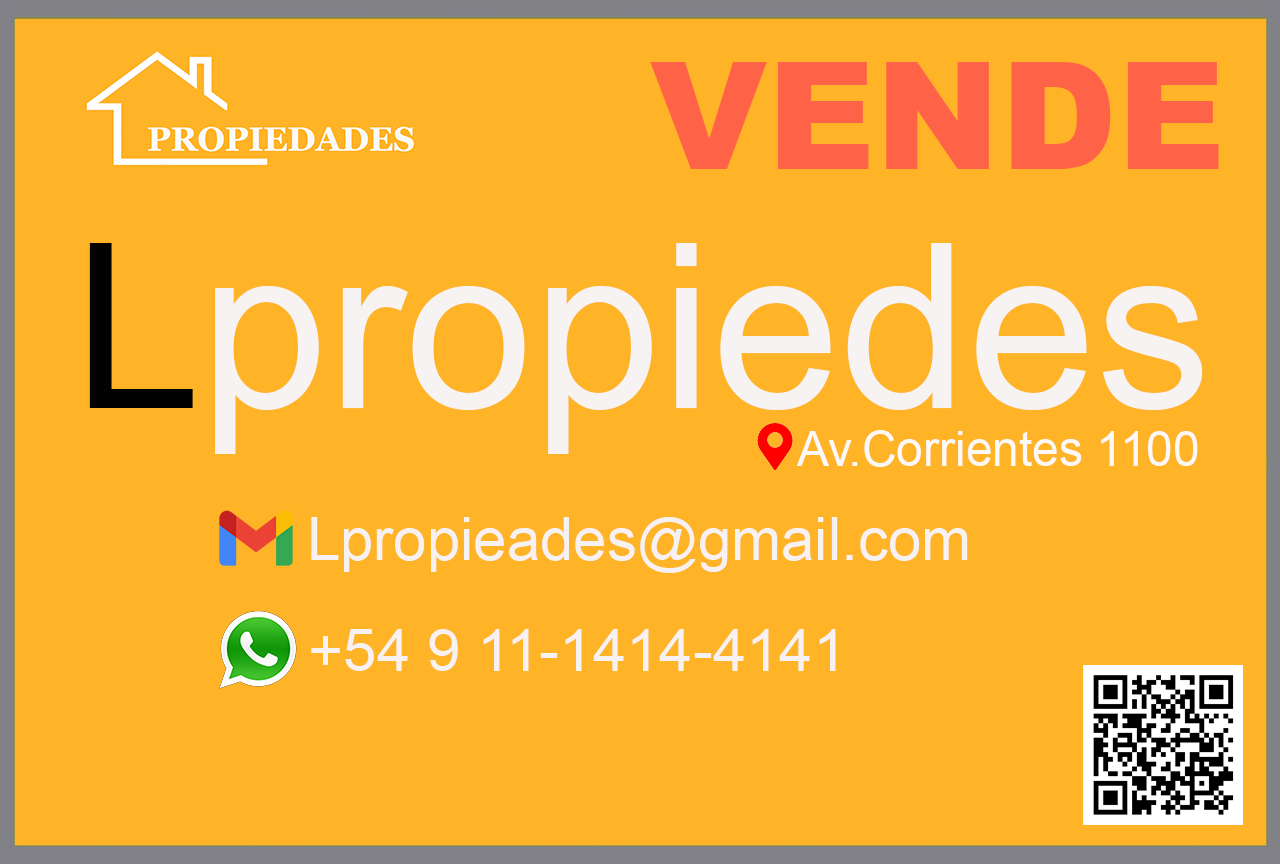
<style>
.page{position:relative;width:1280px;height:864px;background:#ffb326}
.page>*{position:absolute;margin:0}
.t1{font:150px "Arial-Black";color:#ff6347}
.t2{font:230px "ArialMT";color:#f7f3f3}
.t3{font:230px "ArialMT";color:#030202}
.t4{font:48px "ArialMT";color:#fcf8f8}
.t5{font:60px "ArialMT";color:#f8f1f2}
</style>
<div class="page">
<p class="t1" style="left:650px;top:62px;width:569px;height:107px">VENDE</p>
<p class="t2" style="left:89px;top:243px;width:1114px;height:211px"><span class="t3">L</span>propiedes</p>
<p class="t4" style="left:796px;top:430px;width:402px;height:37px">Av.Corrientes 1100</p>
<p class="t5" style="left:311px;top:517px;width:657px;height:56px">Lpropieades@gmail.com</p>
<p class="t5" style="left:311px;top:629px;width:525px;height:42px">+54 9 11-1414-4141</p>
</div>
